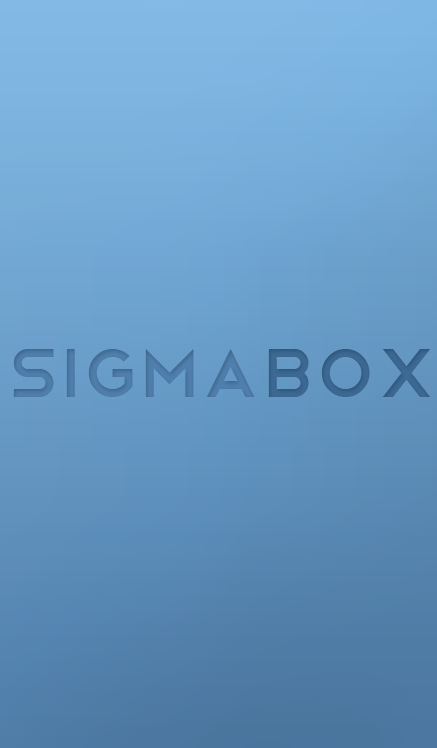
<style>
.page{position:relative;width:437px;height:748px}
.page>*{position:absolute;margin:0}
.t1{font:88.9px "Telegrafico";color:#4f80ad}
.t2{font:88.9px "Telegrafico";color:#3c6a95}
</style>
<div class="page">
<p class="t1" style="left:13px;top:349px;width:418px;height:48px">Sigma<span class="t2">box</span></p>
</div>
